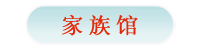
<style>
.page{position:relative;width:216px;height:55px;background:#ffffff}
.page>*{position:absolute;margin:0}
.t1{font:22px "SimSun";letter-spacing:0.2em;color:#e52809;text-transform:uppercase;font-weight:bold}
</style>
<div class="page">
<p class="t1" style="left:62px;top:15px;width:76px;height:21px">家族馆</p>
</div>
